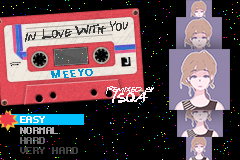
<style>
.page{position:relative;width:240px;height:160px;background:#000000}
.page>*{position:absolute;margin:0}
.t1{font:12px "GabrielWeissFriendsFont";color:#383838}
.t2{font:1px/2px "OCRAStd";color:#000000;font-weight:bold}
.t3{font:10.3px "SegoeUI";letter-spacing:0.18em;color:#0094d1;text-transform:uppercase;font-weight:bold}
.t4{font:8px/10px "GabrielWeissFriendsFont";color:#fff2f9}
.t5{font:16px/10px "GabrielWeissFriendsFont";color:#fff2f9}
.t6{font:16px "Coder's-Crux";color:#ffffff;text-transform:uppercase;font-weight:bold}
.t7{font:16px "Coder's-Crux";color:#a8a8a8;text-transform:uppercase;font-weight:bold}
.t8{font:16px "Coder's-Crux";color:#676767;text-transform:uppercase;font-weight:bold}
.t9{font:16px "Coder's-Crux";color:#404040;text-transform:uppercase;font-weight:bold}
</style>
<div class="page">
<p class="t1" style="left:25px;top:21px;width:103px;height:21px;rotate:-7deg">In Love With You</p>
<p class="t2" style="left:9px;top:62px;width:12px;height:5px;text-align:right;rotate:-4deg">not for resale<br>dolby noise</p>
<p class="t3" style="left:51px;top:69px;width:42px;height:9px;rotate:-5deg">Meeyo</p>
<p class="t4" style="left:106px;top:86px;width:48px;height:17px;text-align:center">Remixed by<br><span class="t5">Isqa</span></p>
<p class="t6" style="left:20px;top:116px;width:25px;height:7px">Easy</p>
<p class="t7" style="left:20px;top:127px;width:38px;height:7px">NORMAL</p>
<p class="t8" style="left:20px;top:137px;width:25px;height:7px">HARD</p>
<p class="t9" style="left:20px;top:147px;width:58px;height:7px">Very Hard</p>
</div>
